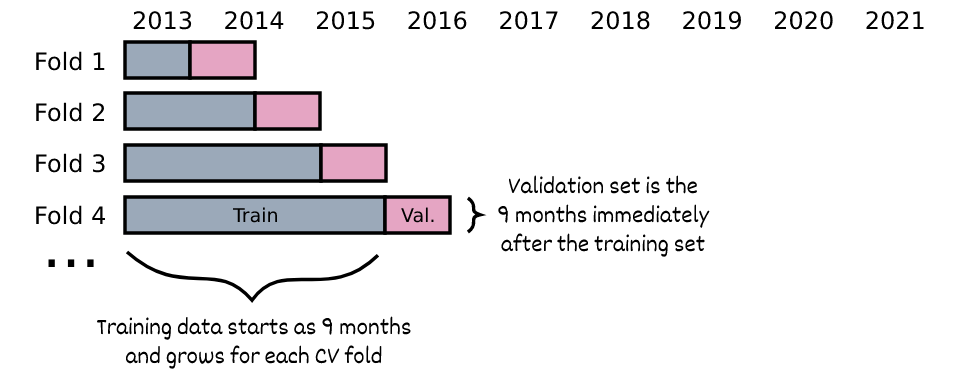
<style>
.page{position:relative;width:960px;height:380px;background:#ffffff}
.page>*{position:absolute;margin:0}
.t1{font:24px "DejaVuSans";color:#000000}
.t2{font:24px "Dekko";color:#000000}
.t3{font:19px "DejaVuSans";color:#000000}
.t4{font:61px "DejaVuSans";color:#000000}
</style>
<div class="page">
<p class="t1" style="left:133px;top:11px;width:791px;height:19px">2013    2014    2015    2016    2017    2018    2019    2020    2021</p>
<p class="t1" style="left:36px;top:51px;width:69px;height:20px">Fold 1</p>
<p class="t1" style="left:36px;top:102px;width:69px;height:20px">Fold 2</p>
<p class="t1" style="left:36px;top:153px;width:69px;height:20px">Fold 3</p>
<p class="t2" style="left:498px;top:175px;width:212px;height:82px;text-align:center">Validation set is the<br>9 months immediately<br>after the training set</p>
<p class="t1" style="left:36px;top:205px;width:70px;height:20px">Fold 4</p>
<p class="t3" style="left:232px;top:207px;width:45px;height:16px">Train</p>
<p class="t3" style="left:401px;top:207px;width:33px;height:16px">Val.</p>
<p class="t4" style="left:48px;top:259px;width:46px;height:8px">...</p>
<p class="t2" style="left:97px;top:316px;width:314px;height:53px;text-align:center">Training data starts as 9 months<br>and grows for each CV fold</p>
</div>
